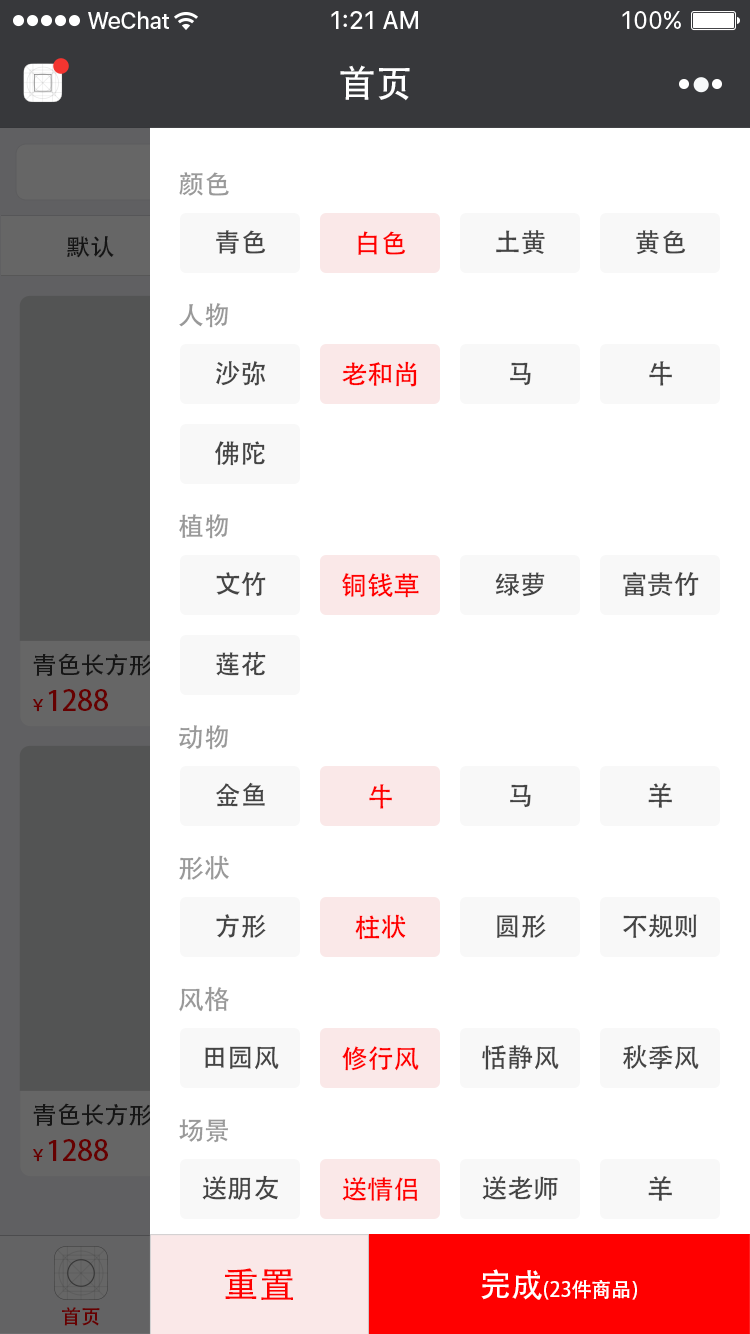
<style>
.page{position:relative;width:750px;height:1334px;background:#ffffff}
.page>*{position:absolute;margin:0}
.t1{font:37px "AdobeHeitiStd-Regular";color:#ffffff}
.t2{font:26px "AdobeHeitiStd-Regular";color:#999999}
.t3{font:26px "AdobeHeitiStd-Regular";color:#444444}
.t4{font:26px "AdobeHeitiStd-Regular";color:#ff0000}
.t5{font:24px "AdobeHeitiStd-Regular";color:#151515}
.t6{font:28px "AdobeHeitiStd-Regular";color:#660000}
.t7{font:16px "AdobeHeitiStd-Regular";color:#660000}
.t8{font:36px "AdobeHeitiStd-Regular";color:#ff0000}
.t9{font:20px "AdobeHeitiStd-Regular";color:#ffffff}
.t10{font:32px "AdobeHeitiStd-Regular";color:#ffffff}
.t11{font:20px "AdobeHeitiStd-Regular";color:#660000}
</style>
<div class="page">
<p class="t1" style="left:340px;top:65px;width:70px;height:36px">首页</p>
<p class="t2" style="left:179px;top:172px;width:50px;height:24px">颜色</p>
<p class="t3" style="left:216px;top:230px;width:50px;height:24px">青色</p>
<p class="t4" style="left:358px;top:231px;width:48px;height:24px">白色</p>
<p class="t3" style="left:496px;top:230px;width:49px;height:25px">土黄</p>
<p class="t3" style="left:636px;top:230px;width:50px;height:25px">黄色</p>
<p class="t5" style="left:67px;top:236px;width:47px;height:22px">默认</p>
<p class="t2" style="left:179px;top:303px;width:49px;height:25px">人物</p>
<p class="t3" style="left:216px;top:361px;width:49px;height:25px">沙弥</p>
<p class="t4" style="left:342px;top:361px;width:75px;height:26px">老和尚</p>
<p class="t3" style="left:510px;top:362px;width:21px;height:24px">马</p>
<p class="t3" style="left:649px;top:361px;width:23px;height:25px">牛</p>
<p class="t3" style="left:215px;top:441px;width:50px;height:25px">佛陀</p>
<p class="t2" style="left:179px;top:514px;width:49px;height:25px">植物</p>
<p class="t3" style="left:216px;top:572px;width:50px;height:24px">文竹</p>
<p class="t4" style="left:342px;top:573px;width:77px;height:25px">铜钱草</p>
<p class="t3" style="left:495px;top:572px;width:50px;height:25px">绿萝</p>
<p class="t3" style="left:623px;top:572px;width:76px;height:25px">富贵竹</p>
<p class="t3" style="left:216px;top:651px;width:50px;height:25px">莲花</p>
<p class="t6" style="left:33px;top:689px;width:75px;height:23px"><span class="t7">￥</span>1288</p>
<p class="t2" style="left:179px;top:725px;width:49px;height:25px">动物</p>
<p class="t3" style="left:216px;top:782px;width:49px;height:25px">金鱼</p>
<p class="t4" style="left:369px;top:784px;width:23px;height:25px">牛</p>
<p class="t3" style="left:510px;top:784px;width:21px;height:24px">马</p>
<p class="t3" style="left:648px;top:783px;width:24px;height:25px">羊</p>
<p class="t2" style="left:179px;top:855px;width:50px;height:25px">形状</p>
<p class="t3" style="left:216px;top:914px;width:50px;height:24px">方形</p>
<p class="t4" style="left:355px;top:914px;width:51px;height:26px">柱状</p>
<p class="t3" style="left:497px;top:914px;width:49px;height:24px">圆形</p>
<p class="t3" style="left:623px;top:914px;width:74px;height:24px">不规则</p>
<p class="t2" style="left:179px;top:986px;width:50px;height:26px">风格</p>
<p class="t3" style="left:205px;top:1046px;width:74px;height:24px">田园风</p>
<p class="t4" style="left:342px;top:1046px;width:77px;height:25px">修行风</p>
<p class="t3" style="left:482px;top:1045px;width:77px;height:25px">恬静风</p>
<p class="t3" style="left:623px;top:1045px;width:76px;height:25px">秋季风</p>
<p class="t2" style="left:179px;top:1119px;width:49px;height:24px">场景</p>
<p class="t6" style="left:33px;top:1139px;width:75px;height:23px"><span class="t7">￥</span>1288</p>
<p class="t3" style="left:202px;top:1175px;width:76px;height:25px">送朋友</p>
<p class="t4" style="left:342px;top:1177px;width:76px;height:24px">送情侣</p>
<p class="t3" style="left:482px;top:1176px;width:76px;height:24px">送老师</p>
<p class="t3" style="left:648px;top:1176px;width:24px;height:25px">羊</p>
<p class="t8" style="left:225px;top:1268px;width:68px;height:32px">重置</p>
<p class="t9" style="left:481px;top:1269px;width:156px;height:31px"><span class="t10">完成</span>(23件商品)</p>
<p class="t11" style="left:62px;top:1307px;width:38px;height:19px">首页</p>
</div>
